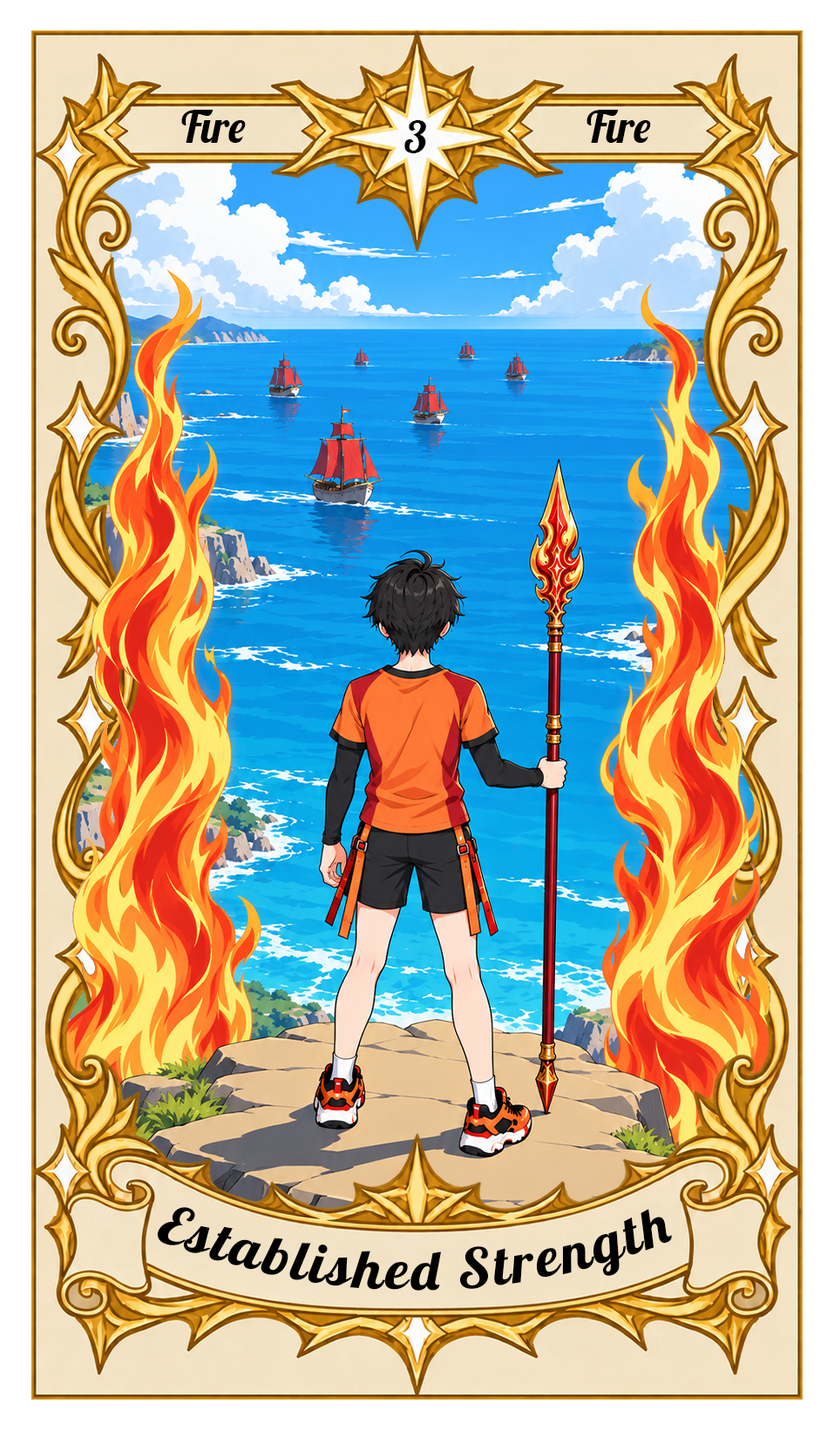
<style>
.page{position:relative;width:834px;height:1430px}
.page>*{position:absolute;margin:0}
.t1{font:43.6px "Lobster-Regular";color:#000000}
.t2{font:54.4px "Lobster-Regular";letter-spacing:0.05em;color:#000000}
</style>
<div class="page">
<p class="t1" style="left:181px;top:110px;width:65px;height:33px">Fire</p>
<p class="t1" style="left:586px;top:110px;width:65px;height:33px">Fire</p>
<p class="t1" style="left:404px;top:120px;width:22px;height:33px">3</p>
<p class="t2" style="left:157px;top:1207px;width:515px;height:84px">Established Strength</p>
</div>
